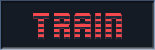
<style>
.page{position:relative;width:155px;height:50px;background:#151b24}
.page>*{position:absolute;margin:0}
.t1{font:36px "Cornerstone"}
</style>
<div class="page">
<p class="t1" style="left:33px;top:13px;width:89px;height:26px">train</p>
<p class="t1" style="left:33px;top:13px;width:89px;height:26px">train</p>
</div>
